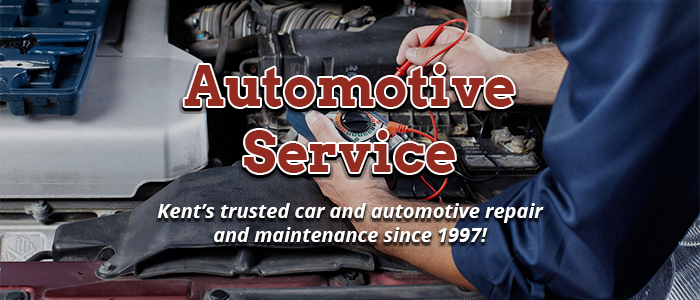
<style>
.page{position:relative;width:700px;height:300px}
.page>*{position:absolute;margin:0}
.t1{font:20px "OpenSans-BoldItalic";color:#fefffe}
</style>
<div class="page">
<p class="t1" style="left:157px;top:203px;width:387px;height:39px;text-align:center">Kent’s trusted car and automotive repair <br>and maintenance since 1997!</p>
</div>
